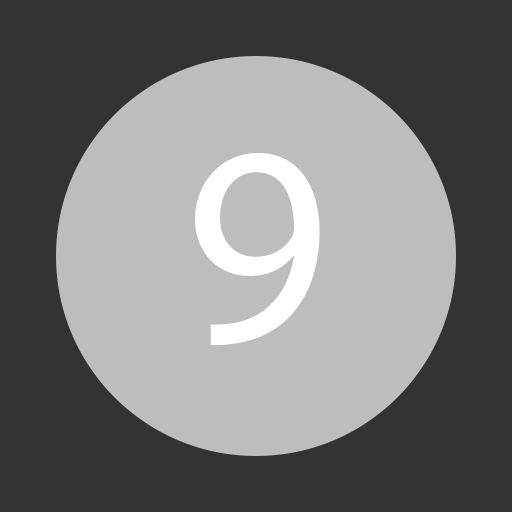
<style>
.page{position:relative;width:512px;height:512px;background:#333333}
.page>*{position:absolute;margin:0}
.t1{font:286px "MyriadPro-Regular";color:#ffffff}
</style>
<div class="page">
<p class="t1" style="left:195px;top:152px;width:125px;height:194px">9</p>
</div>
